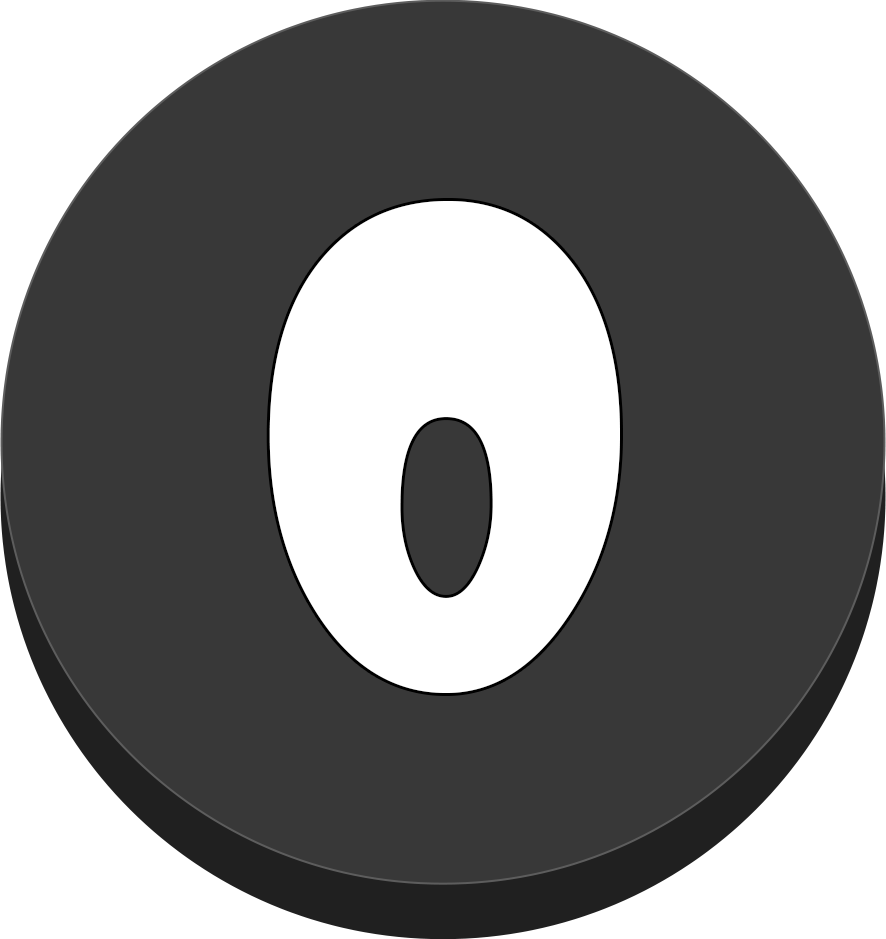
<style>
.page{position:relative;width:886px;height:939px;background:#383838}
.page>*{position:absolute;margin:0}
.t1{font:637.2px "ShowcardGothic-Reg";color:#ffffff}
</style>
<div class="page">
<p class="t1" style="left:269px;top:201px;width:351px;height:492px">0</p>
</div>
